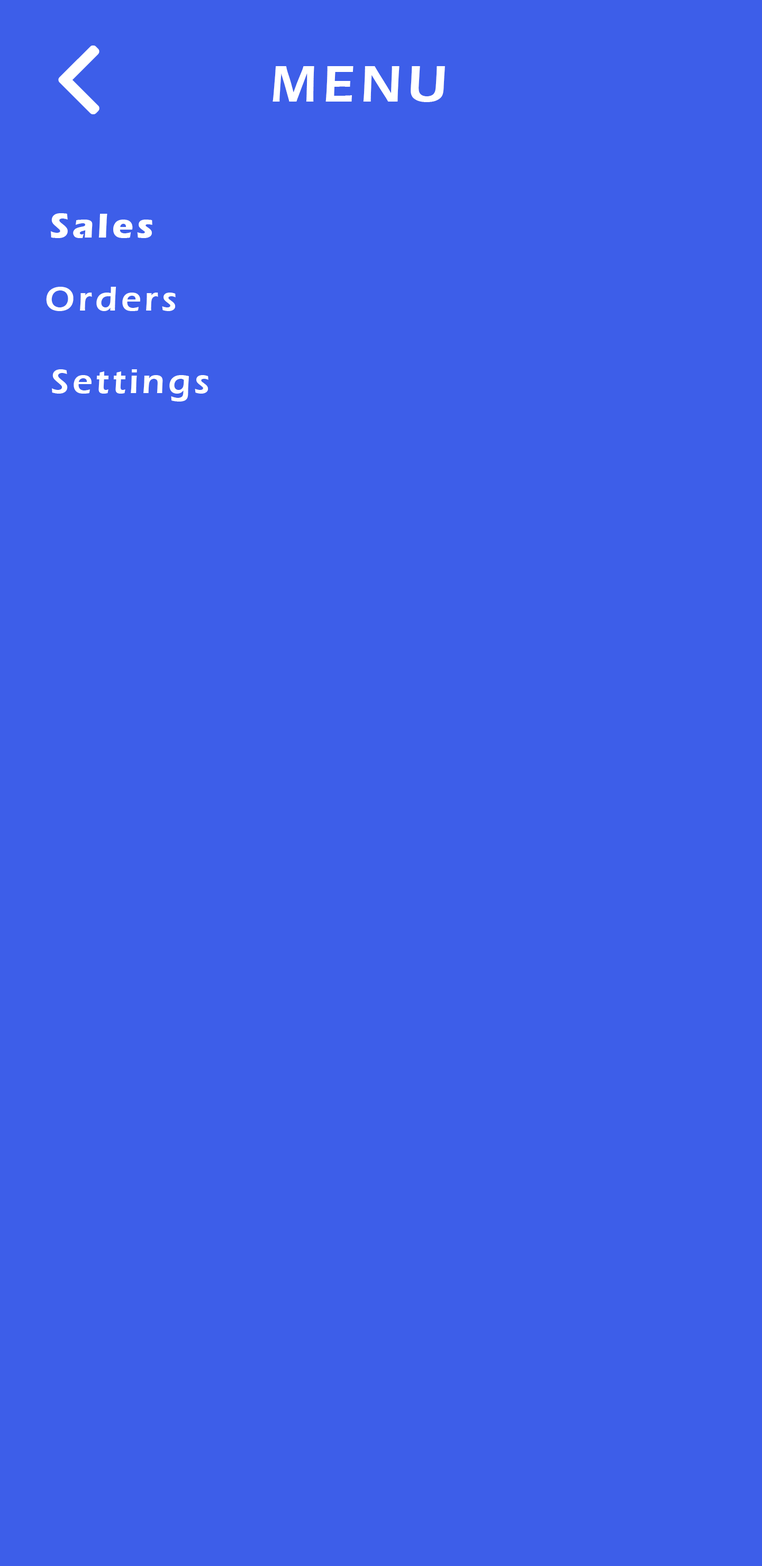
<style>
.page{position:relative;width:762px;height:1566px;background:#3d5ee9}
.page>*{position:absolute;margin:0}
.t1{font:52.9px "ErasITC-Demi";letter-spacing:0.1em;color:#ffffff}
.t2{font:35.3px "ErasITC-Bold";letter-spacing:0.1em;color:#ffffff}
.t3{font:35.3px "ErasITC-Demi";letter-spacing:0.1em;color:#ffffff}
</style>
<div class="page">
<p class="t1" style="left:272px;top:66px;width:173px;height:36px">MENU</p>
<p class="t2" style="left:50px;top:213px;width:102px;height:25px">Sales</p>
<p class="t3" style="left:46px;top:287px;width:130px;height:24px">Orders</p>
<p class="t3" style="left:52px;top:369px;width:156px;height:32px">Settings</p>
</div>
